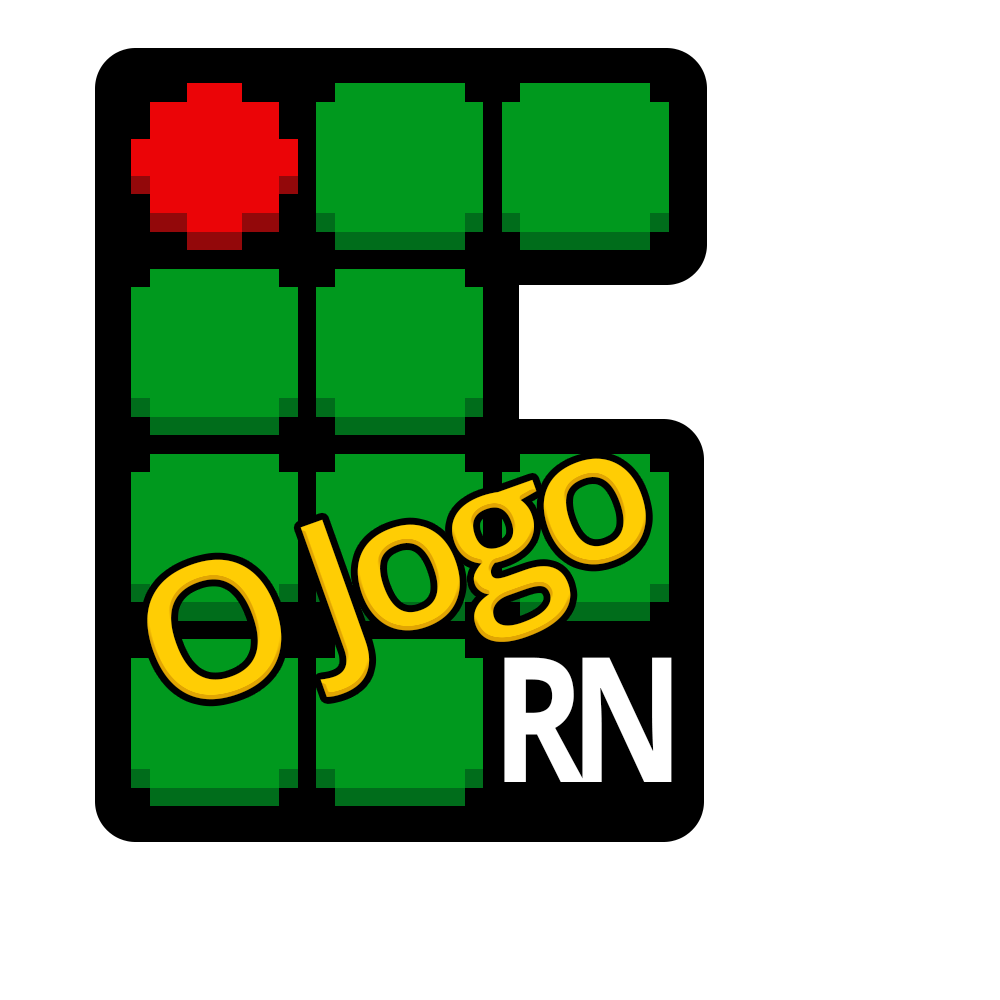
<style>
.page{position:relative;width:1000px;height:1000px;background:#ffffff}
.page>*{position:absolute;margin:0}
.t1{font:186.9px "OpenSans-SemiBold";letter-spacing:-0.075em;color:#ffd200;scale:1.04 1}
.t2{font:174.2px "OpenSans-Bold";letter-spacing:-0.1em;color:#ffffff;scale:0.8 1}
</style>
<div class="page">
<p class="t1" style="left:147px;top:458px;width:499px;height:242px;rotate:-20deg">O Jogo</p>
<p class="t2" style="left:504px;top:657px;width:168px;height:125px">RN</p>
</div>
